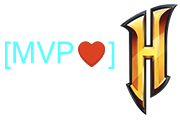
<style>
.page{position:relative;width:180px;height:120px;background:#ffffff}
.page>*{position:absolute;margin:0}
.t1{font:30px "ArialNova";color:#55ffff}
</style>
<div class="page">
<p class="t1" style="left:5px;top:41px;width:110px;height:28px">[MVP     ]</p>
</div>
